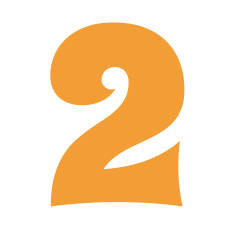
<style>
.page{position:relative;width:236px;height:236px;background:#ffffff}
.page>*{position:absolute;margin:0}
.t1{font:250px "SpicyRice-Regular";color:#f29d35}
</style>
<div class="page">
<p class="t1" style="left:50px;top:22px;width:135px;height:185px">2</p>
</div>
